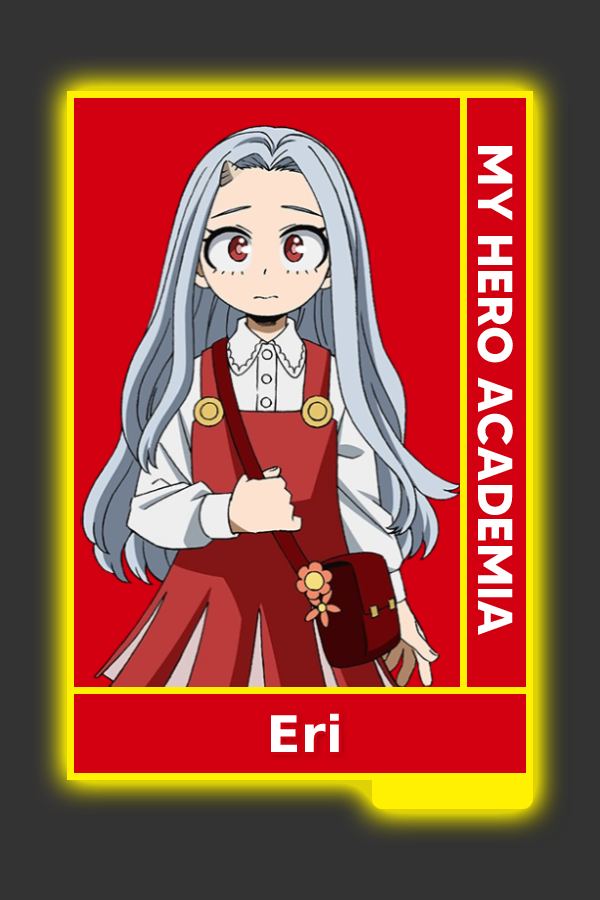
<style>
.page{position:relative;width:600px;height:900px;background:#d20010}
.page>*{position:absolute;margin:0}
.t1{font:48.8px "MADETOMMY-Bold";color:#ffffff}
.t2{font:50.5px "MADETOMMY-Bold";color:#ffffff}
</style>
<div class="page">
<p class="t1" style="left:477px;top:146px;width:36px;height:489px;rotate:90deg">MY HERO ACADEMIA</p>
<p class="t2" style="left:270px;top:713px;width:69px;height:39px">Eri</p>
</div>
